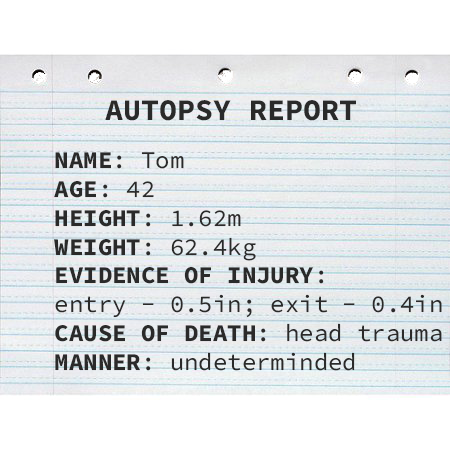
<style>
.page{position:relative;width:450px;height:450px;background:#ffffff}
.page>*{position:absolute;margin:0}
.t1{font:30px "SourceCodeRoman-Bold";color:#2a2a2a}
.t2{font:24px "SourceCodeVariable-Roman";color:#2a2a2a}
.t3{font:24px "SourceCodeRoman-Bold";color:#2a2a2a}
</style>
<div class="page">
<p class="t1" style="left:105px;top:100px;width:251px;height:21px">AUTOPSY REPORT</p>
<p class="t2" style="left:54px;top:152px;width:388px;height:219px"><span class="t3">NAME</span>: Tom<br><span class="t3">AGE</span>: 42<br><span class="t3">HEIGHT</span>: 1.62m<br><span class="t3">WEIGHT</span>: 62.4kg<br><span class="t3">EVIDENCE OF INJURY</span>:<br>entry - 0.5in; exit - 0.4in<br><span class="t3">CAUSE OF DEATH</span>: head trauma<br><span class="t3">MANNER</span>: undeterminded</p>
</div>
